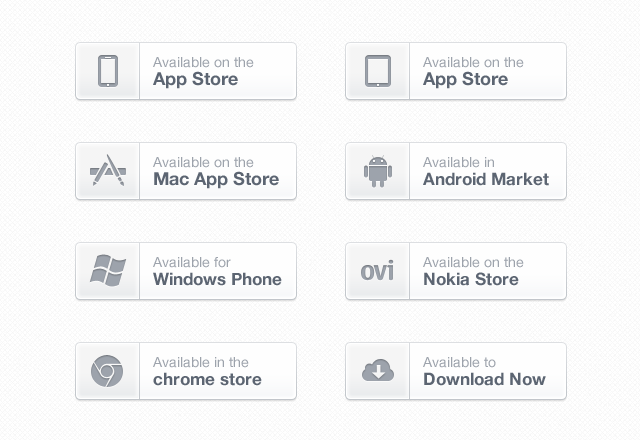
<style>
.page{position:relative;width:640px;height:440px;background:#ffffff}
.page>*{position:absolute;margin:0}
.t1{font:14px "HelveticaNeue";color:#9da3ac}
.t2{font:18px "HelveticaNeue-Bold";color:#5c6572}
.t3{font:17px "HelveticaNeue-Bold";color:#5c6572}
</style>
<div class="page">
<p class="t1" style="left:153px;top:57px;width:101px;height:11px">Available on the</p>
<p class="t1" style="left:423px;top:57px;width:101px;height:11px">Available on the</p>
<p class="t2" style="left:153px;top:71px;width:85px;height:18px">App Store</p>
<p class="t2" style="left:423px;top:71px;width:85px;height:18px">App Store</p>
<p class="t1" style="left:153px;top:157px;width:101px;height:11px">Available on the</p>
<p class="t1" style="left:423px;top:157px;width:71px;height:11px">Available in</p>
<p class="t2" style="left:154px;top:171px;width:125px;height:18px">Mac App Store</p>
<p class="t3" style="left:423px;top:172px;width:126px;height:14px">Android Market</p>
<p class="t1" style="left:153px;top:257px;width:78px;height:11px">Available for</p>
<p class="t1" style="left:423px;top:257px;width:101px;height:11px">Available on the</p>
<p class="t3" style="left:153px;top:272px;width:129px;height:14px">Windows Phone</p>
<p class="t3" style="left:424px;top:272px;width:95px;height:14px">Nokia Store</p>
<p class="t1" style="left:153px;top:357px;width:96px;height:11px">Available in the</p>
<p class="t1" style="left:423px;top:357px;width:73px;height:11px">Available to</p>
<p class="t3" style="left:153px;top:372px;width:109px;height:14px">chrome store</p>
<p class="t3" style="left:424px;top:372px;width:122px;height:14px">Download Now</p>
</div>
